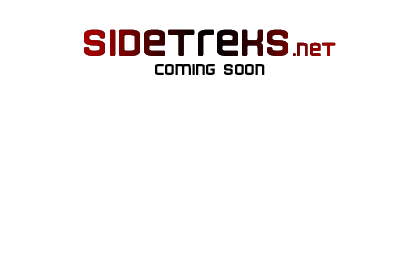
<style>
.page{position:relative;width:400px;height:267px;background:#ffffff}
.page>*{position:absolute;margin:0}
.t1{font:72px "Finder"}
.t2{font:36px "Finder"}
.t3{font:30px "Finder";color:#000000}
</style>
<div class="page">
<p class="t1" style="left:84px;top:29px;width:252px;height:27px">sidetreks<span class="t2">.net</span></p>
<p class="t1" style="left:84px;top:29px;width:252px;height:27px">sidetreks<span class="t2">.net</span></p>
<p class="t3" style="left:155px;top:64px;width:110px;height:11px">coming soon</p>
</div>
